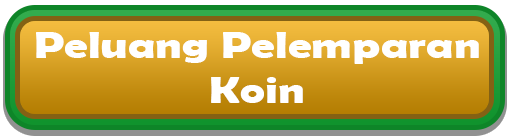
<style>
.page{position:relative;width:510px;height:138px}
.page>*{position:absolute;margin:0}
.t1{font:37.5px "BerlinSansFBDemi-Bold";color:#ffffff;scale:1.25 1}
</style>
<div class="page">
<p class="t1" style="left:36px;top:32px;width:443px;height:71px;text-align:center">Peluang Pelemparan<br>Koin</p>
</div>
